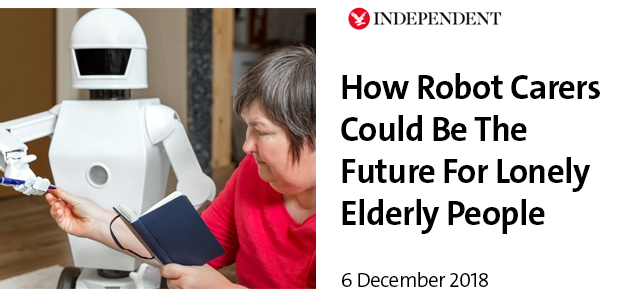
<style>
.page{position:relative;width:633px;height:300px;background:#ffffff}
.page>*{position:absolute;margin:0}
.t1{font:35px "V&ATheSansC6s-Bold";letter-spacing:-0.02em;color:#000000}
.t2{font:20.8px "V&ATheSansC6s-SemiLight";letter-spacing:-0.02em;color:#000000}
</style>
<div class="page">
<p class="t1" style="left:341px;top:73px;width:259px;height:161px">How Robot Carers<br>Could Be The<br>Future For Lonely<br>Elderly People</p>
<p class="t2" style="left:342px;top:272px;width:146px;height:15px">6 December 2018</p>
</div>
